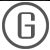
<style>
.page{position:relative;width:50px;height:50px;background:#ffffff}
.page>*{position:absolute;margin:0}
.t1{font:30px "TVpl";letter-spacing:0.05em;color:#545454}
</style>
<div class="page">
<p class="t1" style="left:17px;top:11px;width:18px;height:27px">G</p>
</div>
